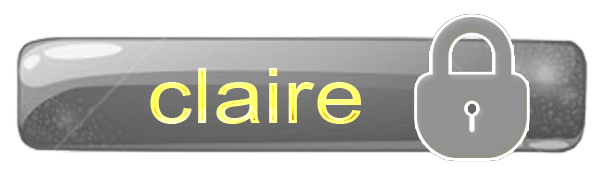
<style>
.page{position:relative;width:599px;height:193px;background:#ffffff}
.page>*{position:absolute;margin:0}
.t1{font:76.6px "ArialUnicodeMS";scale:1.19 1}
</style>
<div class="page">
<p class="t1" style="left:150px;top:68px;width:212px;height:56px">claire</p>
</div>
